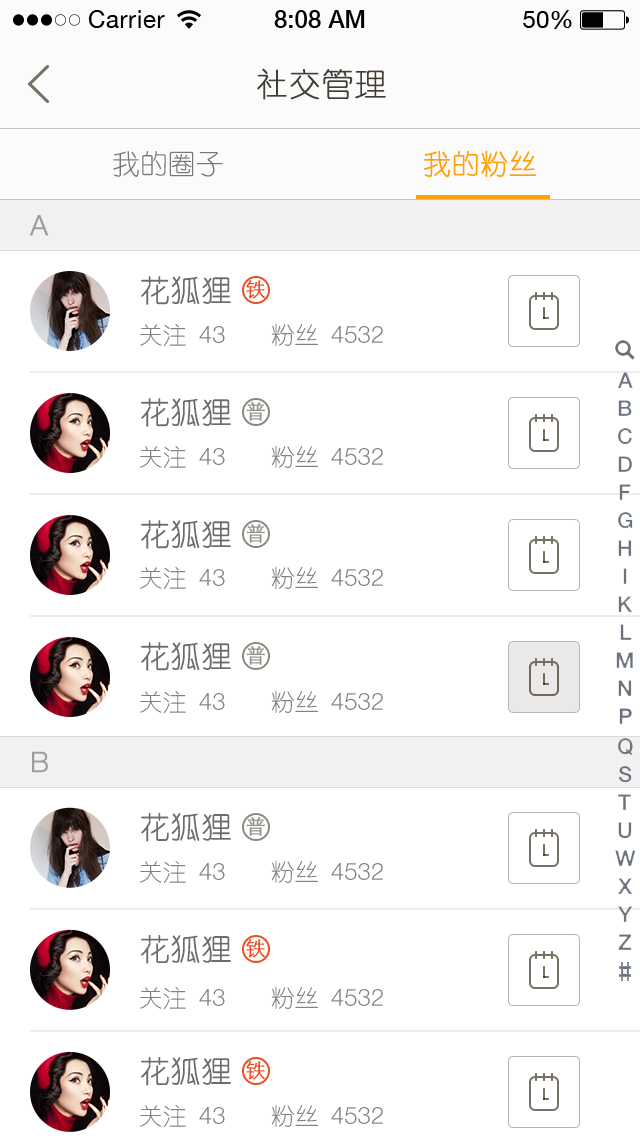
<style>
.page{position:relative;width:640px;height:1136px;background:#ffffff}
.page>*{position:absolute;margin:0}
.t1{font:32px "YouYuan";color:#433d33;text-transform:uppercase;font-weight:bold}
.t2{font:28px "YouYuan";color:#7a7772;text-transform:uppercase}
.t3{font:28px "YouYuan";color:#ffa300;text-transform:uppercase;font-weight:bold}
.t4{font:28px "HelveticaNeueLTPro-Lt";color:#9e9c99;text-transform:uppercase;font-weight:bold}
.t5{font:30px "YouYuan";color:#555555;text-transform:uppercase;font-weight:bold}
.t6{font:20px "STHeitiSC-Light";color:#ed4e1f;text-transform:uppercase;font-weight:bold}
.t7{font:24px "YouYuan";color:#818181;text-transform:uppercase}
.t8{font:24px "HelveticaNeueLTPro-Lt";color:#818181;text-transform:uppercase}
.t9{font:20px "STHeitiSC-Light";color:#93918d;text-transform:uppercase;font-weight:bold}
</style>
<div class="page">
<p class="t1" style="left:257px;top:68px;width:129px;height:32px">社交管理</p>
<p class="t2" style="left:113px;top:150px;width:110px;height:27px">我的圈子</p>
<p class="t3" style="left:423px;top:150px;width:114px;height:28px">我的粉丝</p>
<p class="t4" style="left:29px;top:215px;width:20px;height:21px">A</p>
<p class="t5" style="left:141px;top:276px;width:90px;height:29px;opacity:0.9">花狐狸</p>
<p class="t6" style="left:246px;top:280px;width:20px;height:19px">铁</p>
<p class="t7" style="left:140px;top:324px;width:85px;height:22px">关注 <span class="t8">43</span></p>
<p class="t8" style="left:271px;top:323px;width:112px;height:23px"><span class="t7">粉丝 </span>4532</p>
<p class="t5" style="left:141px;top:398px;width:90px;height:29px;opacity:0.9">花狐狸</p>
<p class="t9" style="left:246px;top:402px;width:19px;height:19px">普</p>
<p class="t7" style="left:140px;top:446px;width:85px;height:22px">关注 <span class="t8">43</span></p>
<p class="t8" style="left:271px;top:445px;width:112px;height:23px"><span class="t7">粉丝 </span>4532</p>
<p class="t5" style="left:141px;top:520px;width:90px;height:29px;opacity:0.9">花狐狸</p>
<p class="t9" style="left:246px;top:524px;width:19px;height:19px">普</p>
<p class="t7" style="left:140px;top:567px;width:85px;height:22px">关注 <span class="t8">43</span></p>
<p class="t8" style="left:271px;top:566px;width:112px;height:23px"><span class="t7">粉丝 </span>4532</p>
<p class="t5" style="left:141px;top:642px;width:90px;height:29px;opacity:0.9">花狐狸</p>
<p class="t9" style="left:246px;top:646px;width:19px;height:19px">普</p>
<p class="t7" style="left:140px;top:691px;width:85px;height:22px">关注 <span class="t8">43</span></p>
<p class="t8" style="left:271px;top:690px;width:112px;height:23px"><span class="t7">粉丝 </span>4532</p>
<p class="t4" style="left:32px;top:751px;width:16px;height:22px">b</p>
<p class="t5" style="left:141px;top:812px;width:90px;height:30px;opacity:0.9">花狐狸</p>
<p class="t9" style="left:246px;top:817px;width:19px;height:19px">普</p>
<p class="t7" style="left:140px;top:861px;width:85px;height:22px">关注 <span class="t8">43</span></p>
<p class="t8" style="left:271px;top:860px;width:112px;height:23px"><span class="t7">粉丝 </span>4532</p>
<p class="t5" style="left:141px;top:935px;width:90px;height:29px;opacity:0.9">花狐狸</p>
<p class="t6" style="left:246px;top:939px;width:20px;height:19px">铁</p>
<p class="t7" style="left:140px;top:987px;width:85px;height:22px">关注 <span class="t8">43</span></p>
<p class="t8" style="left:271px;top:986px;width:112px;height:23px"><span class="t7">粉丝 </span>4532</p>
<p class="t5" style="left:141px;top:1057px;width:90px;height:29px;opacity:0.9">花狐狸</p>
<p class="t6" style="left:246px;top:1061px;width:20px;height:19px">铁</p>
<p class="t7" style="left:140px;top:1105px;width:85px;height:22px">关注 <span class="t8">43</span></p>
<p class="t8" style="left:271px;top:1104px;width:112px;height:23px"><span class="t7">粉丝 </span>4532</p>
</div>
